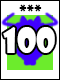
<style>
.page{position:relative;width:60px;height:80px;background:#ffffff}
.page>*{position:absolute;margin:0}
.t1{font:16.7px "ShowcardGothic-Reg";color:#000000}
.t2{font:33.3px "ShowcardGothic-Reg";color:#ffffff}
</style>
<div class="page">
<p class="t1" style="left:19px;top:4px;width:23px;height:8px">***</p>
<p class="t2" style="left:3px;top:27px;width:52px;height:26px">100</p>
</div>
